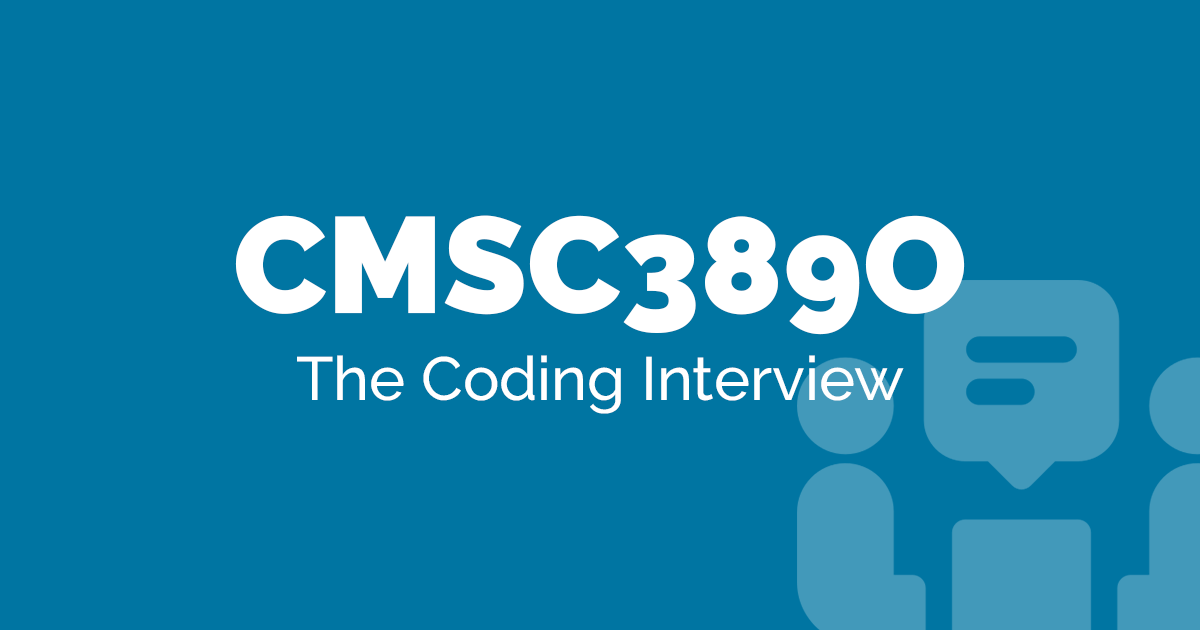
<style>
.page{position:relative;width:1200px;height:630px;background:#0075a2}
.page>*{position:absolute;margin:0}
.t1{font:136px "Raleway-Black";color:#ffffff}
.t2{font:61px "Raleway-Medium";color:#ffffff}
</style>
<div class="page">
<p class="t1" style="left:235px;top:215px;width:730px;height:120px">CMSC389O</p>
<p class="t2" style="left:297px;top:355px;width:607px;height:59px">The Coding Interview</p>
</div>
